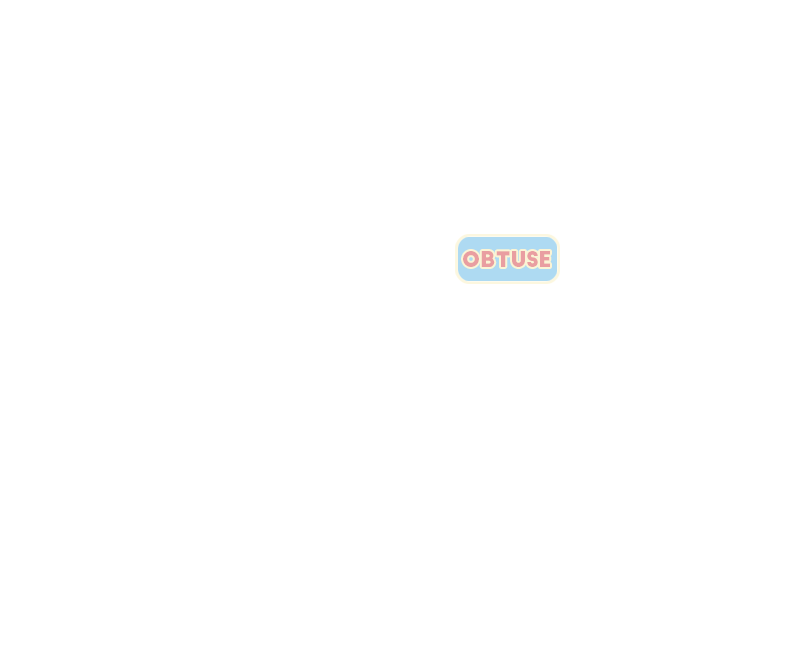
<style>
.page{position:relative;width:800px;height:650px;background:#ffffff}
.page>*{position:absolute;margin:0}
.t1{font:21.2px "BigJohn";color:#e99ea1}
</style>
<div class="page">
<p class="t1" style="left:463px;top:251px;width:87px;height:16px">Obtuse</p>
</div>
